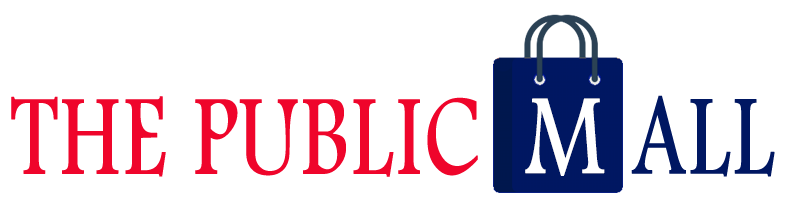
<style>
.page{position:relative;width:789px;height:209px;background:#ffffff}
.page>*{position:absolute;margin:0}
.t1{font:118.4px "FootlightMTLight";color:#f0052b;text-transform:uppercase;font-weight:bold;scale:0.75 1}
.t2{font:118.4px "FootlightMTLight";color:#ffffff;font-weight:bold;scale:0.75 1}
.t3{font:118.4px "FootlightMTLight";color:#001862;text-transform:uppercase;font-weight:bold;scale:0.75 1}
</style>
<div class="page">
<p class="t1" style="left:11px;top:96px;width:467px;height:81px">the public</p>
<p class="t2" style="left:525px;top:98px;width:80px;height:78px">M</p>
<p class="t3" style="left:631px;top:95px;width:144px;height:82px">all</p>
</div>
